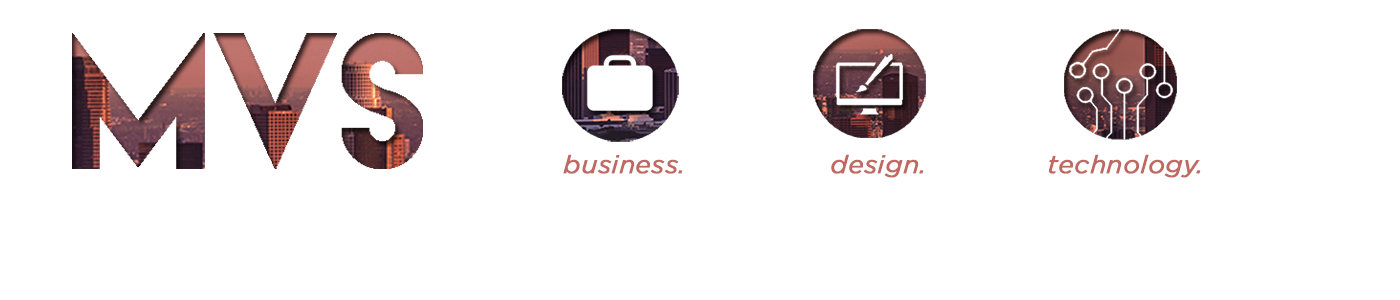
<style>
.page{position:relative;width:1400px;height:300px;background:#ffffff}
.page>*{position:absolute;margin:0}
.t1{font:25px "Gotham-BookItalic";color:#c06962;font-weight:bold;scale:1.04 1}
</style>
<div class="page">
<p class="t1" style="left:563px;top:154px;width:120px;height:20px">business.</p>
<p class="t1" style="left:831px;top:154px;width:93px;height:24px">design.</p>
<p class="t1" style="left:1048px;top:154px;width:153px;height:24px">technology.</p>
</div>
